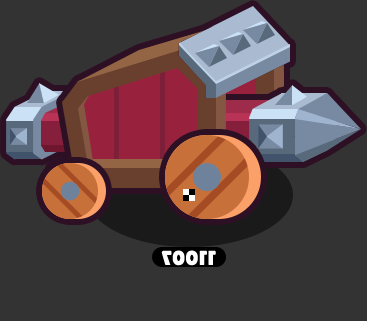
<style>
.page{position:relative;width:367px;height:321px;background:#333333}
.page>*{position:absolute;margin:0}
.t1{font:20px "LilitaOne";color:#ffffff;font-weight:bold}
</style>
<div class="page">
<p class="t1" style="left:161px;top:250px;width:55px;height:16px;rotate:180deg">11007</p>
</div>
